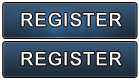
<style>
.page{position:relative;width:140px;height:80px}
.page>*{position:absolute;margin:0}
.t1{font:18px "ArialMT";letter-spacing:0.05em;color:#ffffff;font-weight:bold}
</style>
<div class="page">
<p class="t1" style="left:21px;top:12px;width:101px;height:15px">REGISTER</p>
</div>
